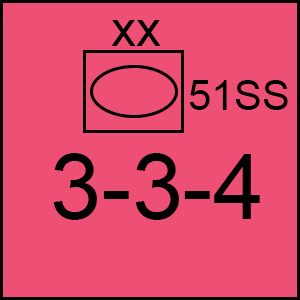
<style>
.page{position:relative;width:300px;height:300px;background:#ee4f74}
.page>*{position:absolute;margin:0}
.t1{font:50px "ArialMT";color:#000000}
.t2{font:41.7px "ArialMT";color:#000000}
.t3{font:91.7px "ArialMT";color:#000000}
</style>
<div class="page">
<p class="t1" style="left:111px;top:20px;width:50px;height:26px">xx</p>
<p class="t2" style="left:189px;top:80px;width:99px;height:30px">51SS</p>
<p class="t3" style="left:53px;top:153px;width:207px;height:67px">3-3-4</p>
</div>
